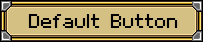
<style>
.page{position:relative;width:203px;height:42px;background:#d5c084}
.page>*{position:absolute;margin:0}
.t1{font:18px "VolterGoldfish";color:#000000}
</style>
<div class="page">
<p class="t1" style="left:28px;top:14px;width:150px;height:14px">Default Button</p>
</div>
